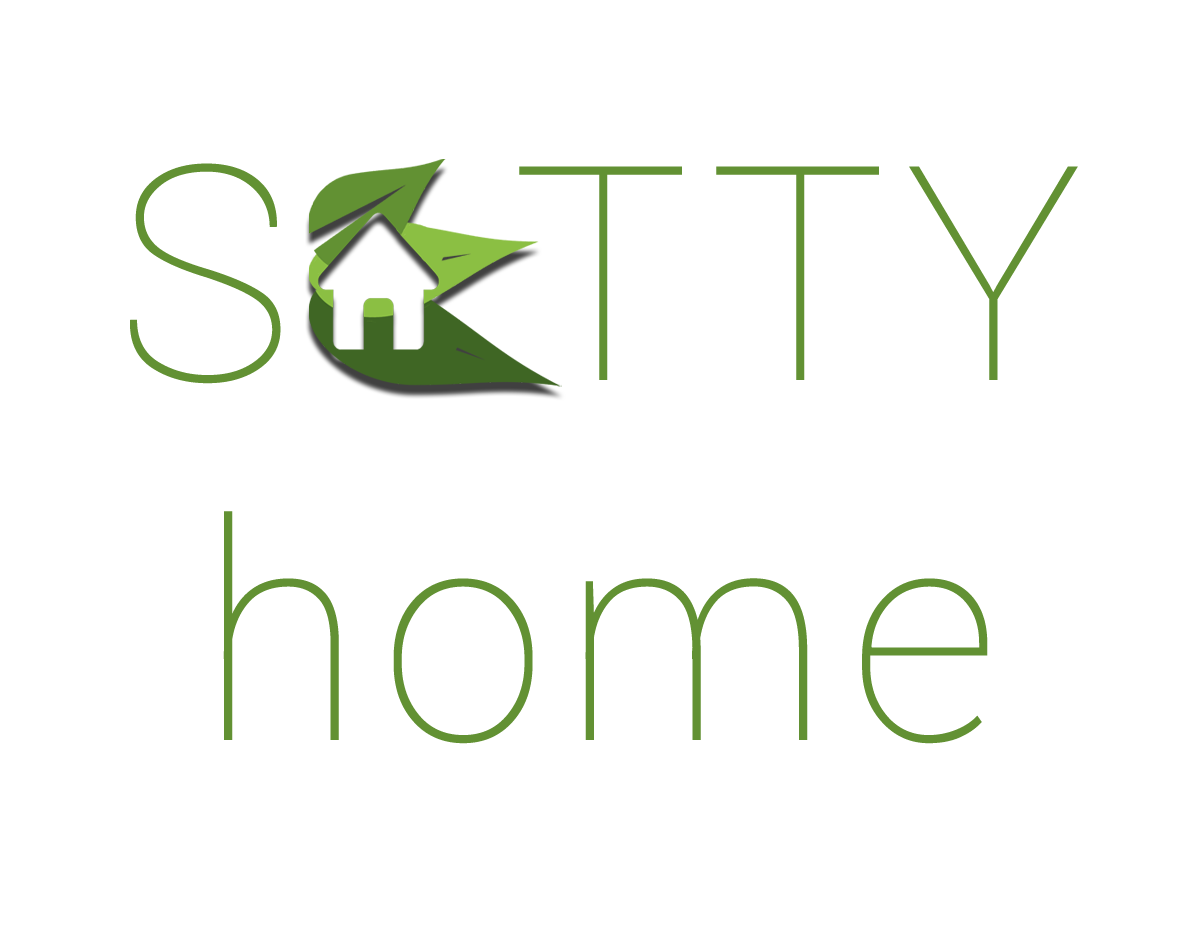
<style>
.page{position:relative;width:1200px;height:952px;background:#ffffff}
.page>*{position:absolute;margin:0}
.t1{font:300px "Roboto-Thin";color:#629133}
</style>
<div class="page">
<p class="t1" style="left:130px;top:163px;width:948px;height:581px;text-align:center">S   T T Y <br>h o m e</p>
</div>
